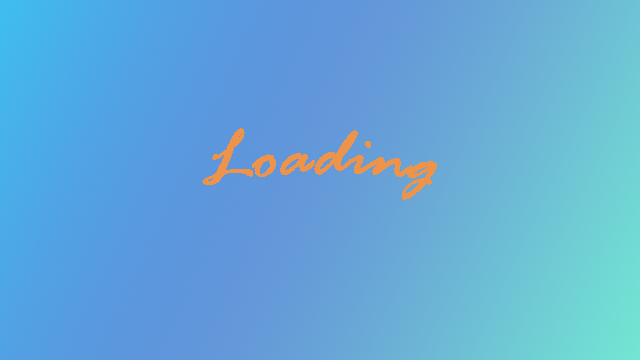
<style>
.page{position:relative;width:640px;height:360px}
.page>*{position:absolute;margin:0}
.t1{font:72px "RageItalic";color:#ed934a}
</style>
<div class="page">
<p class="t1" style="left:202px;top:128px;width:235px;height:72px">Loading</p>
</div>
